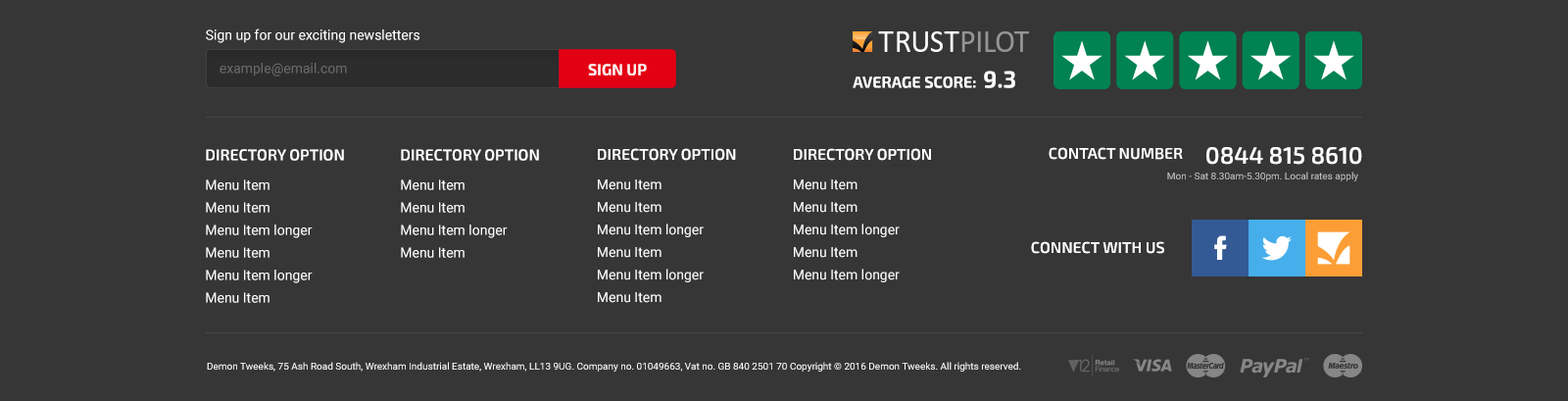
<style>
.page{position:relative;width:1568px;height:401px;background:#363636}
.page>*{position:absolute;margin:0}
.t1{font:13.7px "Roboto-Regular";color:#ffffff}
.t2{font:13.7px "Roboto-Regular";color:#6a6a6a}
.t3{font:15.7px "Exo2-Bold";color:#ffffff;text-transform:uppercase}
.t4{font:23.5px "Exo2-Bold";color:#ffffff;text-transform:uppercase}
.t5{font:15.7px "Exo2-SemiBold";color:#ffffff;text-transform:uppercase}
.t6{font:23.5px "Exo2-SemiBold";color:#ffffff;text-transform:uppercase}
.t7{font:9.8px "Roboto-Regular";color:#c0c0c0}
.t8{font:13.7px/22.5px "Roboto-Regular";color:#ffffff}
.t9{font:9.8px "Roboto-Regular";color:#ffffff}
</style>
<div class="page">
<p class="t1" style="left:206px;top:28px;width:213px;height:15px">Sign up for our exciting newsletters</p>
<p class="t2" style="left:220px;top:63px;width:127px;height:13px">example@email.com</p>
<p class="t3" style="left:588px;top:64px;width:59px;height:11px;opacity:0.9">Sign up</p>
<p class="t3" style="left:853px;top:71px;width:162px;height:17px">Average score:  <span class="t4">9.3</span></p>
<p class="t5" style="left:206px;top:149px;width:138px;height:12px">Directory option</p>
<p class="t5" style="left:401px;top:149px;width:138px;height:12px">Directory option</p>
<p class="t5" style="left:598px;top:148px;width:138px;height:13px">Directory option</p>
<p class="t5" style="left:794px;top:148px;width:137px;height:13px">Directory option</p>
<p class="t5" style="left:1049px;top:147px;width:134px;height:13px">Contact number</p>
<p class="t6" style="left:1206px;top:147px;width:156px;height:18px">0844 815 8610</p>
<p class="t7" style="left:1167px;top:172px;width:191px;height:9px">Mon - Sat 8.30am-5.30pm. Local rates apply</p>
<p class="t8" style="left:206px;top:179px;width:107px;height:124px">Menu Item<br>Menu Item<br>Menu Item longer<br>Menu Item<br>Menu Item longer<br>Menu Item</p>
<p class="t8" style="left:401px;top:179px;width:107px;height:79px">Menu Item<br>Menu Item<br>Menu Item longer<br>Menu Item</p>
<p class="t8" style="left:598px;top:179px;width:106px;height:124px">Menu Item<br>Menu Item<br>Menu Item longer<br>Menu Item<br>Menu Item longer<br>Menu Item</p>
<p class="t8" style="left:794px;top:179px;width:106px;height:103px">Menu Item<br>Menu Item<br>Menu Item longer<br>Menu Item<br>Menu Item longer</p>
<p class="t5" style="left:1031px;top:241px;width:133px;height:13px">Connect with us</p>
<p class="t9" style="left:207px;top:362px;width:814px;height:9px">Demon Tweeks, 75 Ash Road South, Wrexham Industrial Estate, Wrexham, LL13 9UG. Company no. 01049663, Vat no. GB 840 2501 70 Copyright © 2016 Demon Tweeks. All rights reserved.</p>
</div>
